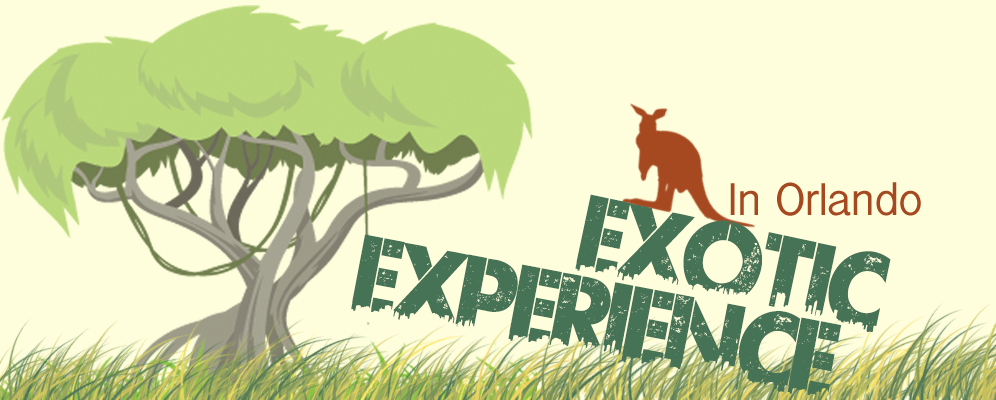
<style>
.page{position:relative;width:996px;height:400px;background:#fefedd}
.page>*{position:absolute;margin:0}
.t1{font:100px "UrbanJungleDEMO";color:#467256}
</style>
<div class="page">
<p class="t1" style="left:575px;top:194px;width:316px;height:138px;rotate:12deg">Exotic</p>
<p class="t1" style="left:351px;top:234px;width:491px;height:162px;rotate:11deg">Experience</p>
</div>
